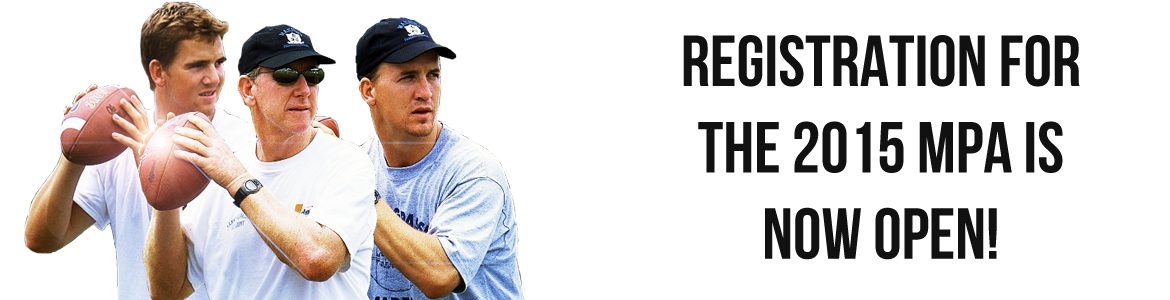
<style>
.page{position:relative;width:1170px;height:300px;background:#ffffff}
.page>*{position:absolute;margin:0}
.t1{font:72px "BebasNeue";color:#111111}
</style>
<div class="page">
<p class="t1" style="left:683px;top:35px;width:397px;height:225px;text-align:center">Registration for<br>the 2015 MPA is<br>Now Open!</p>
</div>
